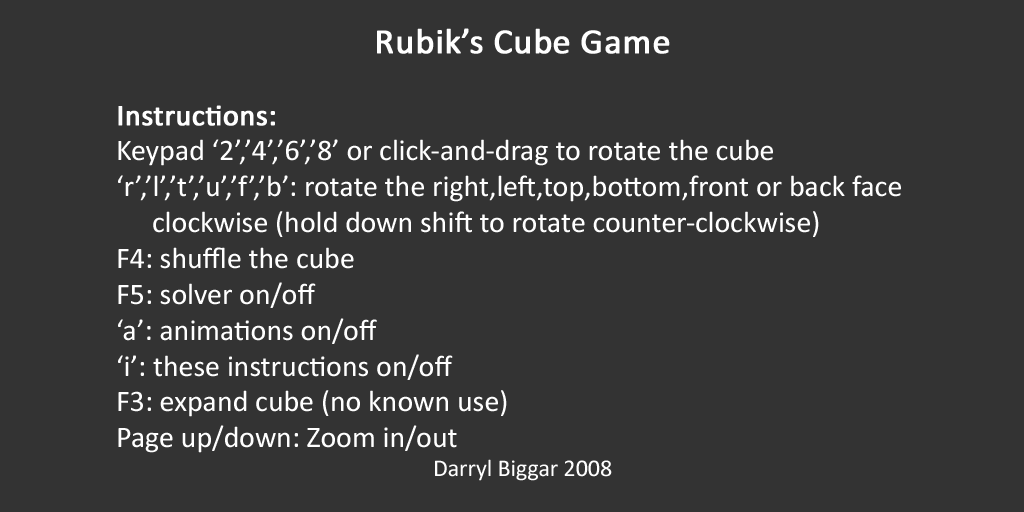
<style>
.page{position:relative;width:1024px;height:512px;background:#333333}
.page>*{position:absolute;margin:0}
.t1{font:29.9px "Calibri";color:#ffffff}
.t2{font:35.9px "Calibri";color:#ffffff;font-weight:bold}
.t3{font:29.9px "Calibri";color:#ffffff;font-weight:bold}
.t4{font:23.9px "Calibri";color:#ffffff}
</style>
<div class="page">
<p class="t1" style="left:118px;top:28px;width:783px;height:453px;text-align:center"><span class="t2">Rubik’s Cube Game<br><br></span><span class="t3">Instructions:<br></span>Keypad ‘2’,’4’,’6’,’8’ or click-and-drag to rotate the cube<br>‘r’,’l’,’t’,’u’,’f’,’b’: rotate the right,left,top,bottom,front or back face<br> clockwise (hold down shift to rotate counter-clockwise)<br>F4: shuffle the cube<br>F5: solver on/off<br>‘a’: animations on/off<br>‘i’: these instructions on/off<br>F3: expand cube (no known use)<br>Page up/down: Zoom in/out<br><span class="t4">Darryl Biggar 2008</span></p>
</div>
